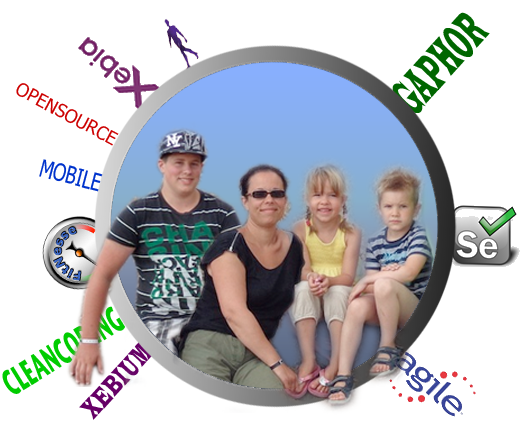
<style>
.page{position:relative;width:523px;height:436px;background:#ffffff}
.page>*{position:absolute;margin:0}
.t1{font:53.1px "LatinWide";color:#006600;scale:0.25 1}
.t2{font:18px "Tahoma";color:#cc0000}
.t3{font:24px "Tahoma";color:#0033cc;scale:0.75 1}
.t4{font:36.6px "StoneSansITC-Bold";color:#00cc00;scale:0.49 1}
.t5{font:28.5px "LatinWide";color:#660066;scale:0.38 1}
</style>
<div class="page">
<p class="t1" style="left:392px;top:12px;width:98px;height:101px;rotate:-48deg">GAPHOR</p>
<p class="t2" style="left:16px;top:83px;width:103px;height:63px;rotate:28deg">OPENSOURCE</p>
<p class="t3" style="left:39px;top:159px;width:64px;height:33px;rotate:15deg">MOBILE</p>
<p class="t4" style="left:2px;top:306px;width:123px;height:88px;rotate:-32deg">CLEANCODING</p>
<p class="t5" style="left:79px;top:341px;width:75px;height:79px;rotate:-48deg">XEBIUM</p>
</div>
